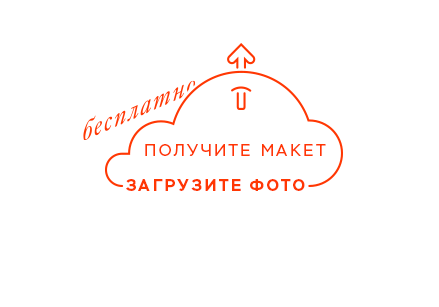
<style>
.page{position:relative;width:439px;height:307px;background:#ffffff}
.page>*{position:absolute;margin:0}
.t1{font:16px "Stem-Regular";letter-spacing:0.16em;color:#ff3703;text-transform:uppercase}
.t2{font:16px "Stem-Bold";letter-spacing:0.15em;color:#ff3703;text-transform:uppercase}
</style>
<div class="page">
<p class="t1" style="left:145px;top:144px;width:181px;height:12px">ПОЛУЧИТе МАКЕТ</p>
<p class="t2" style="left:126px;top:179px;width:179px;height:12px">загрузите фото</p>
</div>
